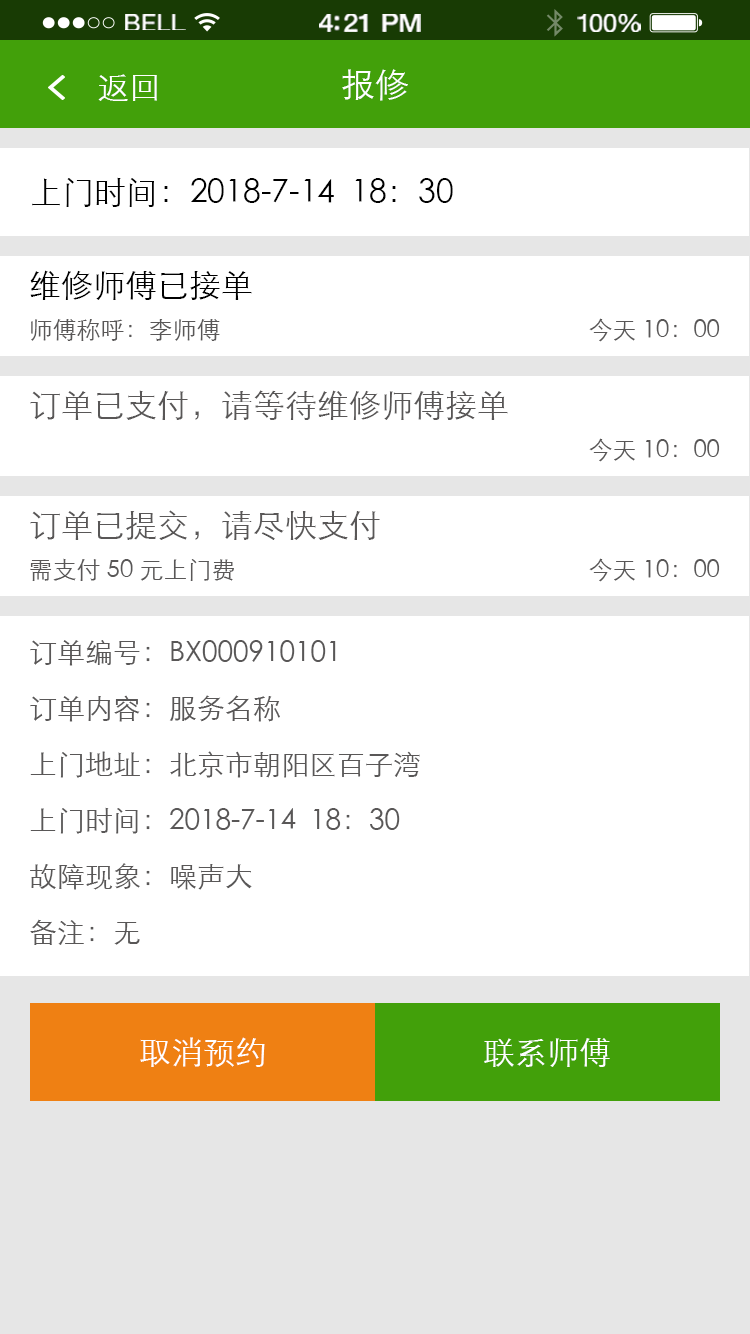
<style>
.page{position:relative;width:750px;height:1334px;background:#ffffff}
.page>*{position:absolute;margin:0}
.t1{font:23.3px "HelveticaNeue";letter-spacing:0.02em;color:#ffffff;scale:1.06 1}
.t2{font:25.3px "HelveticaNeue-Medium";letter-spacing:-0.02em;color:#ffffff;scale:1.06 1}
.t3{font:24.3px "HelveticaNeue";letter-spacing:-0.02em;color:#ffffff;scale:1.06 1}
.t4{font:32px "STXihei";color:#ffffff}
.t5{font:34px "STXihei";color:#ffffff}
.t6{font:32px "STXihei";color:#000000}
.t7{font:24px "STXihei";color:#595757}
.t8{font:32px "STXihei";color:#595757}
.t9{font:28px/56px "STXihei";color:#595757}
</style>
<div class="page">
<p class="t1" style="left:125px;top:14px;width:61px;height:16px">BELL</p>
<p class="t2" style="left:319px;top:14px;width:102px;height:18px">4:21 PM</p>
<p class="t3" style="left:577px;top:14px;width:64px;height:18px">100%</p>
<p class="t4" style="left:98px;top:74px;width:59px;height:27px">返回</p>
<p class="t5" style="left:342px;top:69px;width:66px;height:32px">报修</p>
<p class="t6" style="left:32px;top:177px;width:421px;height:30px">上门时间：2018-7-14  18：30</p>
<p class="t6" style="left:30px;top:270px;width:222px;height:30px">维修师傅已接单</p>
<p class="t7" style="left:589px;top:318px;width:131px;height:24px">今天 10：00</p>
<p class="t7" style="left:31px;top:319px;width:189px;height:22px">师傅称呼：李师傅</p>
<p class="t8" style="left:30px;top:390px;width:478px;height:30px">订单已支付，请等待维修师傅接单</p>
<p class="t7" style="left:589px;top:438px;width:131px;height:24px">今天 10：00</p>
<p class="t8" style="left:30px;top:510px;width:350px;height:30px">订单已提交，请尽快支付</p>
<p class="t7" style="left:30px;top:558px;width:204px;height:23px">需支付 50 元上门费</p>
<p class="t7" style="left:589px;top:558px;width:131px;height:24px">今天 10：00</p>
<p class="t9" style="left:30px;top:640px;width:390px;height:305px">订单编号：BX000910101<br>订单内容：服务名称<br>上门地址：北京市朝阳区百子湾<br>上门时间：2018-7-14  18：30<br>故障现象：噪声大<br>备注：无</p>
<p class="t4" style="left:140px;top:1037px;width:125px;height:30px">取消预约</p>
<p class="t4" style="left:484px;top:1038px;width:126px;height:29px">联系师傅</p>
</div>
